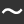
<style>
.page{position:relative;width:24px;height:24px;background:#333333}
.page>*{position:absolute;margin:0}
.t1{font:42.6px "Avenir-Book";letter-spacing:-0.01em;color:#ffffff}
</style>
<div class="page">
<p class="t1" style="left:1px;top:8px;width:22px;height:6px">~</p>
</div>
